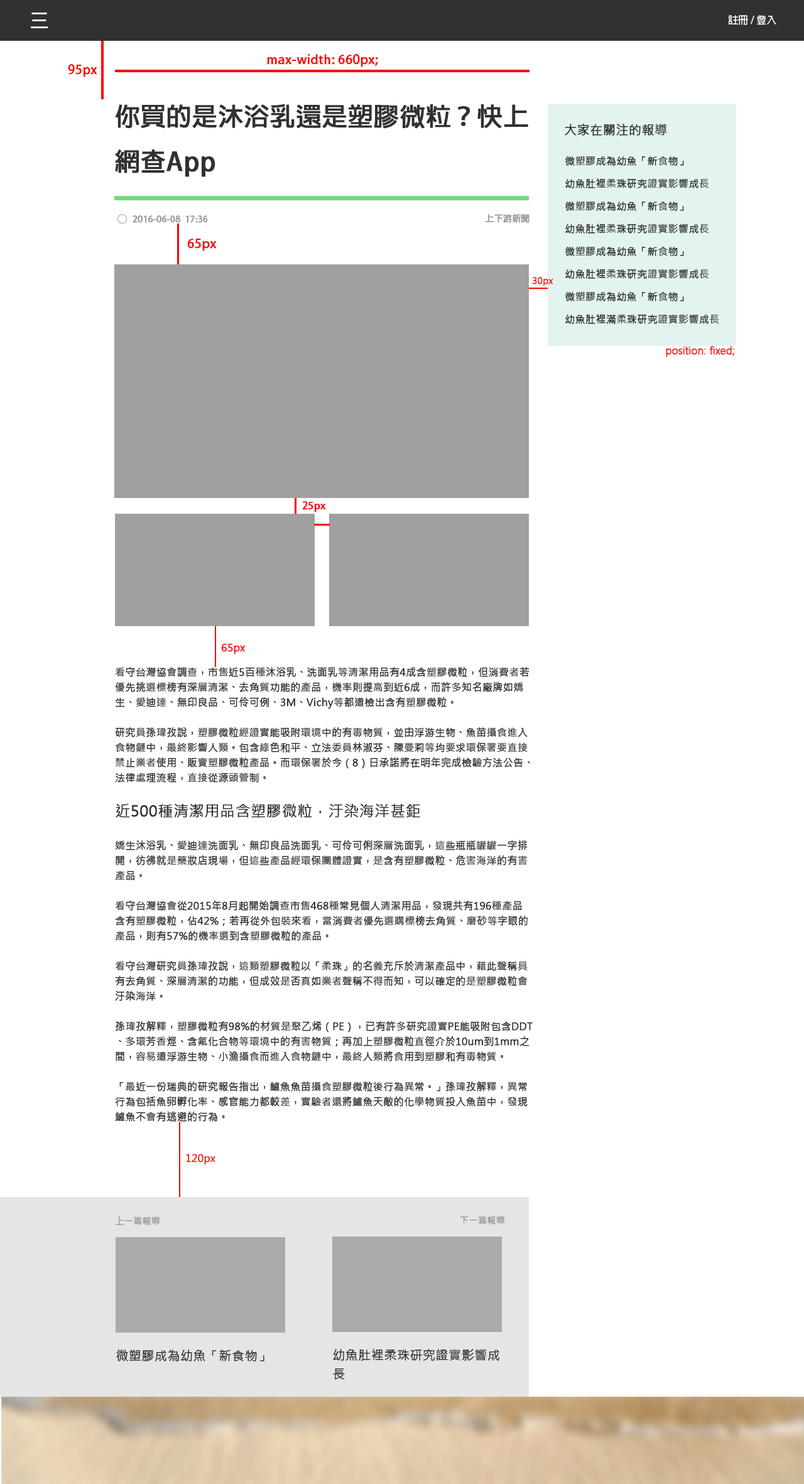
<style>
.page{position:relative;width:804px;height:1484px;background:#ffffff}
.page>*{position:absolute;margin:0}
.t1{font:18.8px "AdobeFanHeitiStd-Bold";color:#ffffff}
.t2{font:10px "AdobeFanHeitiStd-Bold";color:#ffffff}
.t3{font:12.6px "AdobeFanHeitiStd-Bold";color:#ff0000;font-weight:bold}
.t4{font:25.1px/45.2px "AdobeFanHeitiStd-Bold";color:#313131;font-weight:bold}
.t5{font:12.6px "MicrosoftJhengHeiRegular";color:#313131;font-weight:bold}
.t6{font:10px/22.6px "MicrosoftJhengHeiLight";color:#313131;font-weight:bold}
.t7{font:8.8px "AdobeFanHeitiStd-Bold";color:#9c9c9c;font-weight:bold}
.t8{font:8.8px "MicrosoftJhengHeiRegular";color:#ff0000;font-weight:bold}
.t9{font:10px "MicrosoftJhengHeiLight";color:#ff0000;font-weight:bold}
.t10{font:10px "AdobeFanHeitiStd-Bold";color:#ff0101;font-weight:bold}
.t11{font:10px "MicrosoftJhengHeiRegular";color:#ff0000;font-weight:bold}
.t12{font:10px/15.1px "MicrosoftJhengHeiRegular";color:#313131;font-weight:bold}
.t13{font:15.1px/22.6px "MicrosoftJhengHeiRegular";color:#313131;font-weight:bold}
.t14{font:8.8px "MicrosoftJhengHeiRegular";color:#9b9b9b;font-weight:bold}
.t15{font:12.6px "MicrosoftJhengHeiLight";color:#313131;font-weight:bold}
.t16{font:12.6px/18.8px "MicrosoftJhengHeiLight";color:#313131;font-weight:bold}
</style>
<div class="page">
<p class="t1" style="left:31px;top:13px;width:17px;height:15px">三</p>
<p class="t2" style="left:728px;top:15px;width:48px;height:10px">註冊 / 登入</p>
<p class="t3" style="left:267px;top:54px;width:111px;height:13px">max-width: 660px;</p>
<p class="t3" style="left:68px;top:64px;width:29px;height:13px">95px</p>
<p class="t4" style="left:115px;top:104px;width:413px;height:73px">你買的是沐浴乳還是塑膠微粒？快上<br>網查App</p>
<p class="t5" style="left:564px;top:124px;width:103px;height:12px">大家在關注的報導</p>
<p class="t6" style="left:565px;top:156px;width:154px;height:168px">微塑膠成為幼魚「新食物」<br>幼魚肚裡柔珠研究證實影響成長<br>微塑膠成為幼魚「新食物」<br>幼魚肚裡柔珠研究證實影響成長<br>微塑膠成為幼魚「新食物」<br>幼魚肚裡柔珠研究證實影響成長<br>微塑膠成為幼魚「新食物」<br>幼魚肚裡滿柔珠研究證實影響成長</p>
<p class="t7" style="left:132px;top:215px;width:76px;height:8px">2016-06-08  17:36</p>
<p class="t7" style="left:485px;top:214px;width:44px;height:9px">上下游新聞</p>
<p class="t3" style="left:187px;top:239px;width:30px;height:12px">65px</p>
<p class="t8" style="left:532px;top:277px;width:21px;height:9px">30px</p>
<p class="t9" style="left:666px;top:346px;width:69px;height:11px">position: fixed;</p>
<p class="t10" style="left:302px;top:501px;width:24px;height:11px">25px</p>
<p class="t11" style="left:221px;top:644px;width:25px;height:10px">65px</p>
<p class="t12" style="left:115px;top:667px;width:417px;height:454px">看守台灣協會調查，市售近5百種沐浴乳、洗面乳等清潔用品有4成含塑膠微粒，但消費者若<br>優先挑選標榜有深層清潔、去角質功能的產品，機率則提高到近6成，而許多知名廠牌如嬌<br>生、愛迪達、無印良品、可伶可例、3M、Vichy等都遭檢出含有塑膠微粒。<br><br>研究員孫瑋孜說，塑膠微粒經證實能吸附環境中的有毒物質，並由浮游生物、魚苗攝食進入<br>食物鏈中，最終影響人類。包含綠色和平、立法委員林淑芬、陳曼莉等均要求環保署要直接<br>禁止業者使用、販賣塑膠微粒產品。而環保署於今（8）日承諾將在明年完成檢驗方法公告、<br>法律處理流程，直接從源頭管制。<br><br><span class="t13">近500種清潔用品含塑膠微粒，汙染海洋甚鉅<br></span><br>嬌生沐浴乳、愛迪達洗面乳、無印良品洗面乳、可伶可俐深層洗面乳，這些瓶瓶罐罐一字排<br>開，彷彿就是藥妝店現場，但這些產品經環保團體證實，是含有塑膠微粒、危害海洋的有害<br>產品。<br><br>看守台灣協會從2015年8月起開始調查市售468種常見個人清潔用品，發現共有196種產品<br>含有塑膠微粒，佔42%；若再從外包裝來看，當消費者優先選購標榜去角質、磨砂等字眼的<br>產品，則有57%的機率選到含塑膠微粒的產品。<br><br>看守台灣研究員孫瑋孜說，這類塑膠微粒以「柔珠」的名義充斥於清潔產品中，藉此聲稱具<br>有去角質、深層清潔的功能，但成效是否真如業者聲稱不得而知，可以確定的是塑膠微粒會<br>汙染海洋。<br><br>孫瑋孜解釋，塑膠微粒有98%的材質是聚乙烯（PE），已有許多研究證實PE能吸附包含DDT<br>、多環芳香烴、含氟化合物等環境中的有害物質；再加上塑膠微粒直徑介於10um到1mm之<br>間，容易遭浮游生物、小漁攝食而進入食物鏈中，最終人類將食用到塑膠和有毒物質。<br><br>「最近一份瑞典的研究報告指出，鱸魚魚苗攝食塑膠微粒後行為異常。」孫瑋孜解釋，異常<br>行為包括魚卵孵化率、感官能力都較差，實驗者還將鱸魚天敵的化學物質投入魚苗中，發現<br>鱸魚不會有逃避的行為。</p>
<p class="t11" style="left:186px;top:1153px;width:29px;height:12px">120px</p>
<p class="t14" style="left:115px;top:1216px;width:45px;height:9px">上一篇報導</p>
<p class="t14" style="left:460px;top:1216px;width:45px;height:8px">下一篇報導</p>
<p class="t15" style="left:116px;top:1349px;width:148px;height:12px">微塑膠成為幼魚「新食物」</p>
<p class="t16" style="left:333px;top:1349px;width:166px;height:30px">幼魚肚裡柔珠研究證實影響成<br>長</p>
</div>
